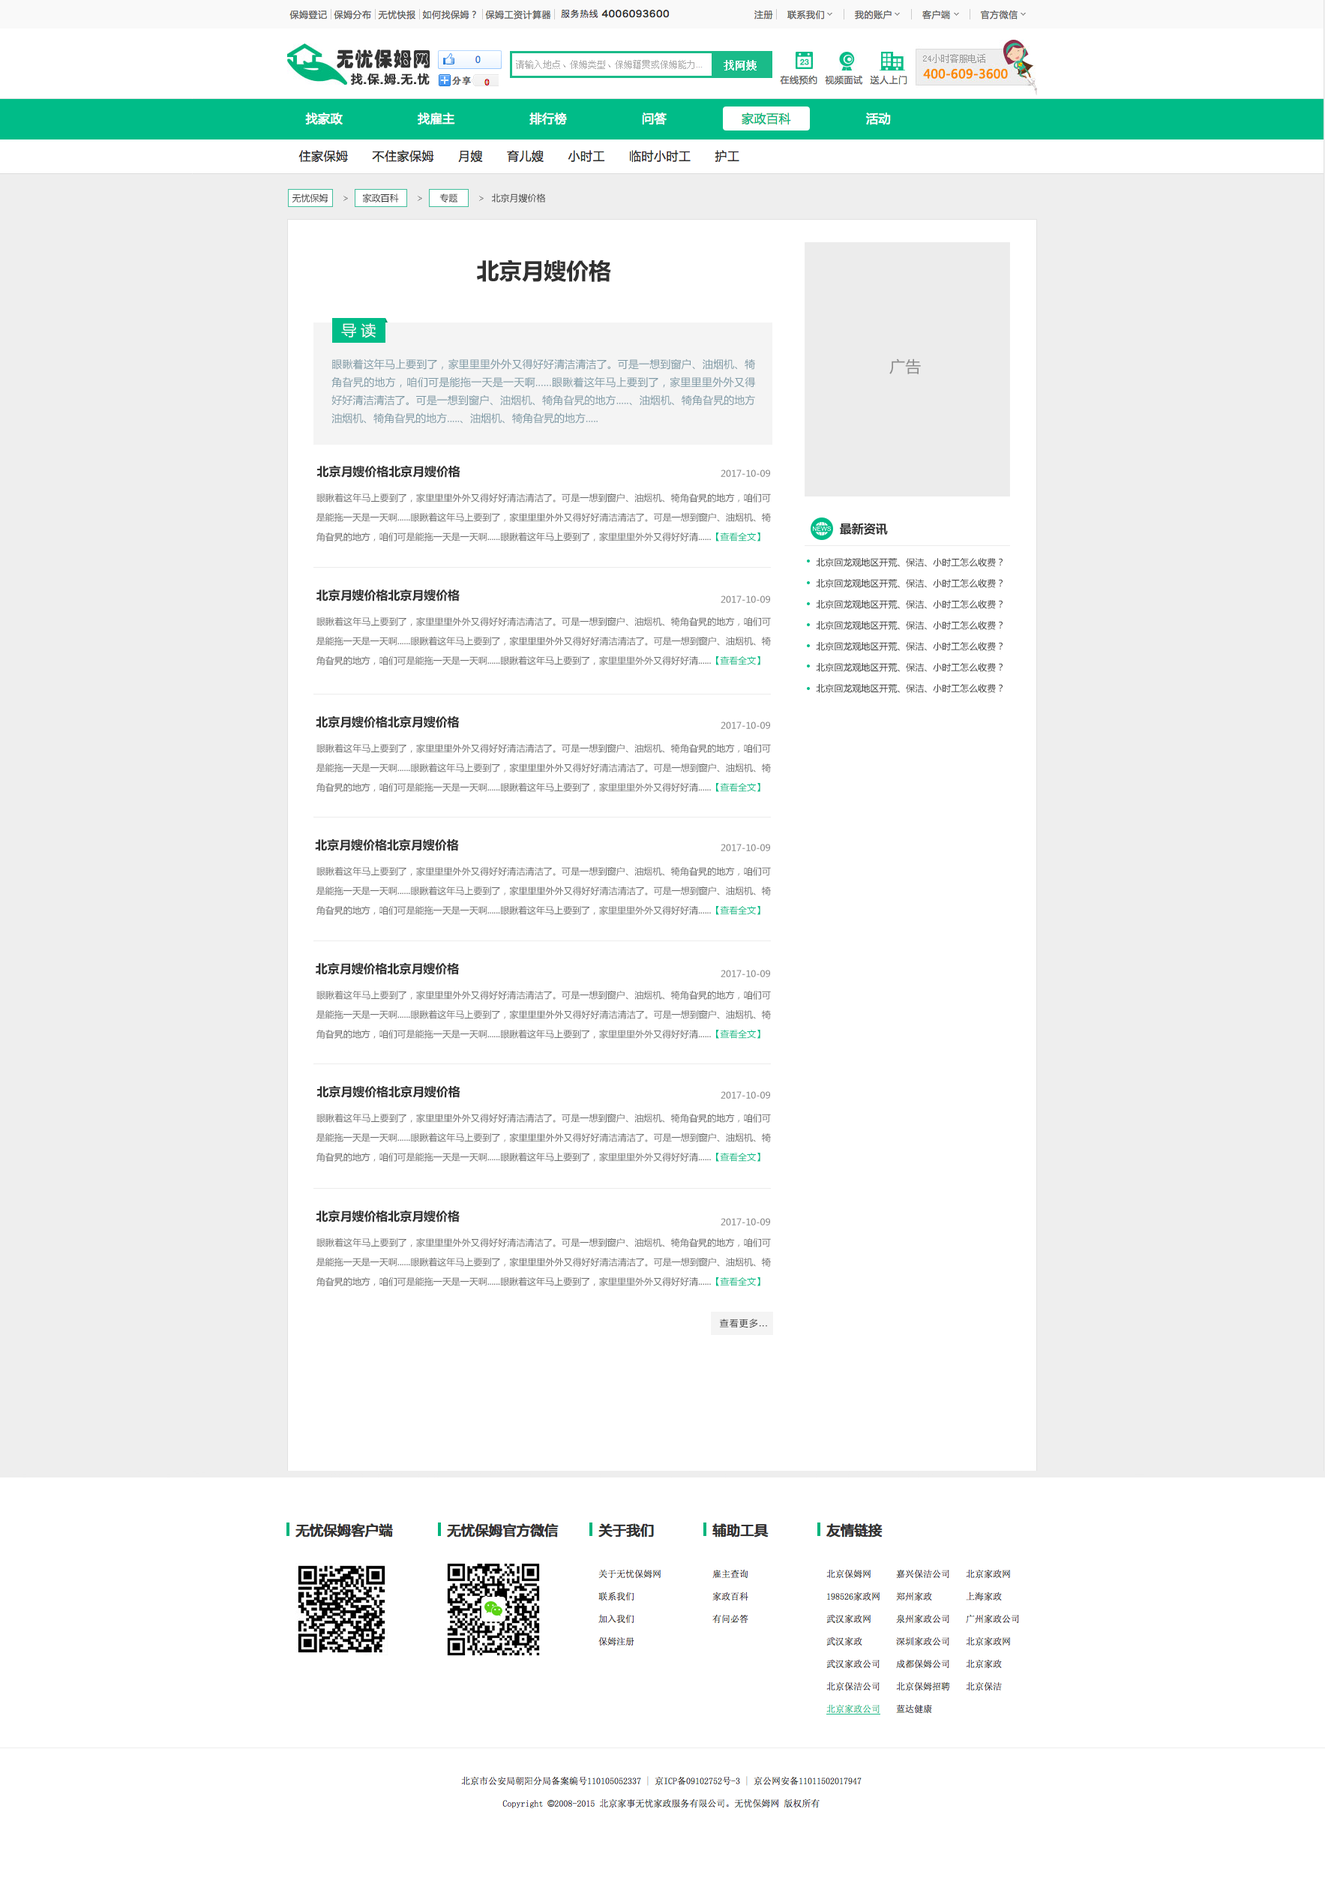
<style>
.page{position:relative;width:1325px;height:1881px;background:#ffffff}
.page>*{position:absolute;margin:0}
.t1{font:9px "MicrosoftYaHei";color:#333333}
.t2{font:10.5px "MicrosoftYaHei";color:#999999}
.t3{font:22.5px "MicrosoftYaHeiUI-Bold";color:#313131}
.t4{font:15px "MicrosoftYaHei";color:#ffffff}
.t5{font:10.5px/18px "MicrosoftYaHei";color:#7f9aa6}
.t6{font:15.8px "MicrosoftYaHei";color:#8c8c8c}
.t7{font:12px "MicrosoftYaHeiUI-Bold";color:#313131}
.t8{font:9px "MicrosoftYaHei";color:#838383}
.t9{font:9px/19.5px "MicrosoftYaHei";color:#6b6b6b}
.t10{font:9px/19.5px "MicrosoftYaHei";color:#00bc88}
.t11{font:9px/21px "MicrosoftYaHei";color:#333333}
.t12{font:9px "MicrosoftYaHei";letter-spacing:0.1em;color:#313131}
</style>
<div class="page">
<p class="t1" style="left:292px;top:194px;width:36px;height:8px">无忧保姆</p>
<p class="t2" style="left:344px;top:196px;width:4px;height:5px">&gt;</p>
<p class="t1" style="left:362px;top:194px;width:37px;height:8px">家政百科</p>
<p class="t2" style="left:418px;top:196px;width:4px;height:5px">&gt;</p>
<p class="t1" style="left:440px;top:194px;width:18px;height:8px">专题</p>
<p class="t2" style="left:479px;top:196px;width:5px;height:5px">&gt;</p>
<p class="t1" style="left:491px;top:194px;width:55px;height:8px">北京月嫂价格</p>
<p class="t3" style="left:477px;top:260px;width:134px;height:22px">北京月嫂价格</p>
<p class="t4" style="left:341px;top:323px;width:35px;height:15px">导 读</p>
<p class="t5" style="left:332px;top:358px;width:423px;height:66px;text-align:justify">眼瞅着这年马上要到了，家里里里外外又得好好清洁清洁了。可是一想到窗户、油烟机、犄角旮旯的地方，咱们可是能拖一天是一天啊......眼瞅着这年马上要到了，家里里里外外又得好好清洁清洁了。可是一想到窗户、油烟机、犄角旮旯的地方.....、油烟机、犄角旮旯的地方油烟机、犄角旮旯的地方.....、油烟机、犄角旮旯的地方.....</p>
<p class="t6" style="left:890px;top:358px;width:31px;height:16px">广告</p>
<p class="t7" style="left:316px;top:465px;width:144px;height:13px">北京月嫂价格北京月嫂价格</p>
<p class="t8" style="left:721px;top:470px;width:49px;height:7px">2017-10-09</p>
<p class="t9" style="left:316px;top:493px;width:455px;height:49px;text-align:justify">眼瞅着这年马上要到了，家里里里外外又得好好清洁清洁了。可是一想到窗户、油烟机、犄角旮旯的地方，咱们可是能拖一天是一天啊......眼瞅着这年马上要到了，家里里里外外又得好好清洁清洁了。可是一想到窗户、油烟机、犄角旮旯的地方，咱们可是能拖一天是一天啊......眼瞅着这年马上要到了，家里里里外外又得好好清......<span class="t10">【查看全文】</span></p>
<p class="t7" style="left:840px;top:523px;width:48px;height:12px">最新资讯</p>
<p class="t11" style="left:816px;top:558px;width:187px;height:135px">北京回龙观地区开荒、保洁、小时工怎么收费？<br>北京回龙观地区开荒、保洁、小时工怎么收费？<br>北京回龙观地区开荒、保洁、小时工怎么收费？<br>北京回龙观地区开荒、保洁、小时工怎么收费？<br>北京回龙观地区开荒、保洁、小时工怎么收费？<br>北京回龙观地区开荒、保洁、小时工怎么收费？<br>北京回龙观地区开荒、保洁、小时工怎么收费？</p>
<p class="t7" style="left:316px;top:589px;width:144px;height:13px">北京月嫂价格北京月嫂价格</p>
<p class="t8" style="left:721px;top:596px;width:49px;height:7px">2017-10-09</p>
<p class="t9" style="left:316px;top:616px;width:455px;height:49px;text-align:justify">眼瞅着这年马上要到了，家里里里外外又得好好清洁清洁了。可是一想到窗户、油烟机、犄角旮旯的地方，咱们可是能拖一天是一天啊......眼瞅着这年马上要到了，家里里里外外又得好好清洁清洁了。可是一想到窗户、油烟机、犄角旮旯的地方，咱们可是能拖一天是一天啊......眼瞅着这年马上要到了，家里里里外外又得好好清......<span class="t10">【查看全文】</span></p>
<p class="t7" style="left:316px;top:716px;width:144px;height:12px">北京月嫂价格北京月嫂价格</p>
<p class="t8" style="left:721px;top:722px;width:49px;height:7px">2017-10-09</p>
<p class="t9" style="left:316px;top:743px;width:455px;height:49px;text-align:justify">眼瞅着这年马上要到了，家里里里外外又得好好清洁清洁了。可是一想到窗户、油烟机、犄角旮旯的地方，咱们可是能拖一天是一天啊......眼瞅着这年马上要到了，家里里里外外又得好好清洁清洁了。可是一想到窗户、油烟机、犄角旮旯的地方，咱们可是能拖一天是一天啊......眼瞅着这年马上要到了，家里里里外外又得好好清......<span class="t10">【查看全文】</span></p>
<p class="t7" style="left:315px;top:838px;width:144px;height:13px">北京月嫂价格北京月嫂价格</p>
<p class="t8" style="left:721px;top:844px;width:49px;height:7px">2017-10-09</p>
<p class="t9" style="left:316px;top:866px;width:455px;height:49px;text-align:justify">眼瞅着这年马上要到了，家里里里外外又得好好清洁清洁了。可是一想到窗户、油烟机、犄角旮旯的地方，咱们可是能拖一天是一天啊......眼瞅着这年马上要到了，家里里里外外又得好好清洁清洁了。可是一想到窗户、油烟机、犄角旮旯的地方，咱们可是能拖一天是一天啊......眼瞅着这年马上要到了，家里里里外外又得好好清......<span class="t10">【查看全文】</span></p>
<p class="t7" style="left:316px;top:962px;width:143px;height:13px">北京月嫂价格北京月嫂价格</p>
<p class="t8" style="left:721px;top:970px;width:49px;height:7px">2017-10-09</p>
<p class="t9" style="left:316px;top:990px;width:455px;height:49px;text-align:justify">眼瞅着这年马上要到了，家里里里外外又得好好清洁清洁了。可是一想到窗户、油烟机、犄角旮旯的地方，咱们可是能拖一天是一天啊......眼瞅着这年马上要到了，家里里里外外又得好好清洁清洁了。可是一想到窗户、油烟机、犄角旮旯的地方，咱们可是能拖一天是一天啊......眼瞅着这年马上要到了，家里里里外外又得好好清......<span class="t10">【查看全文】</span></p>
<p class="t7" style="left:316px;top:1085px;width:144px;height:13px">北京月嫂价格北京月嫂价格</p>
<p class="t8" style="left:721px;top:1091px;width:49px;height:8px">2017-10-09</p>
<p class="t9" style="left:316px;top:1113px;width:455px;height:49px;text-align:justify">眼瞅着这年马上要到了，家里里里外外又得好好清洁清洁了。可是一想到窗户、油烟机、犄角旮旯的地方，咱们可是能拖一天是一天啊......眼瞅着这年马上要到了，家里里里外外又得好好清洁清洁了。可是一想到窗户、油烟机、犄角旮旯的地方，咱们可是能拖一天是一天啊......眼瞅着这年马上要到了，家里里里外外又得好好清......<span class="t10">【查看全文】</span></p>
<p class="t7" style="left:316px;top:1210px;width:144px;height:12px">北京月嫂价格北京月嫂价格</p>
<p class="t8" style="left:721px;top:1218px;width:49px;height:8px">2017-10-09</p>
<p class="t9" style="left:316px;top:1238px;width:455px;height:48px;text-align:justify">眼瞅着这年马上要到了，家里里里外外又得好好清洁清洁了。可是一想到窗户、油烟机、犄角旮旯的地方，咱们可是能拖一天是一天啊......眼瞅着这年马上要到了，家里里里外外又得好好清洁清洁了。可是一想到窗户、油烟机、犄角旮旯的地方，咱们可是能拖一天是一天啊......眼瞅着这年马上要到了，家里里里外外又得好好清......<span class="t10">【查看全文】</span></p>
<p class="t12" style="left:719px;top:1318px;width:48px;height:10px">查看更多...</p>
</div>
